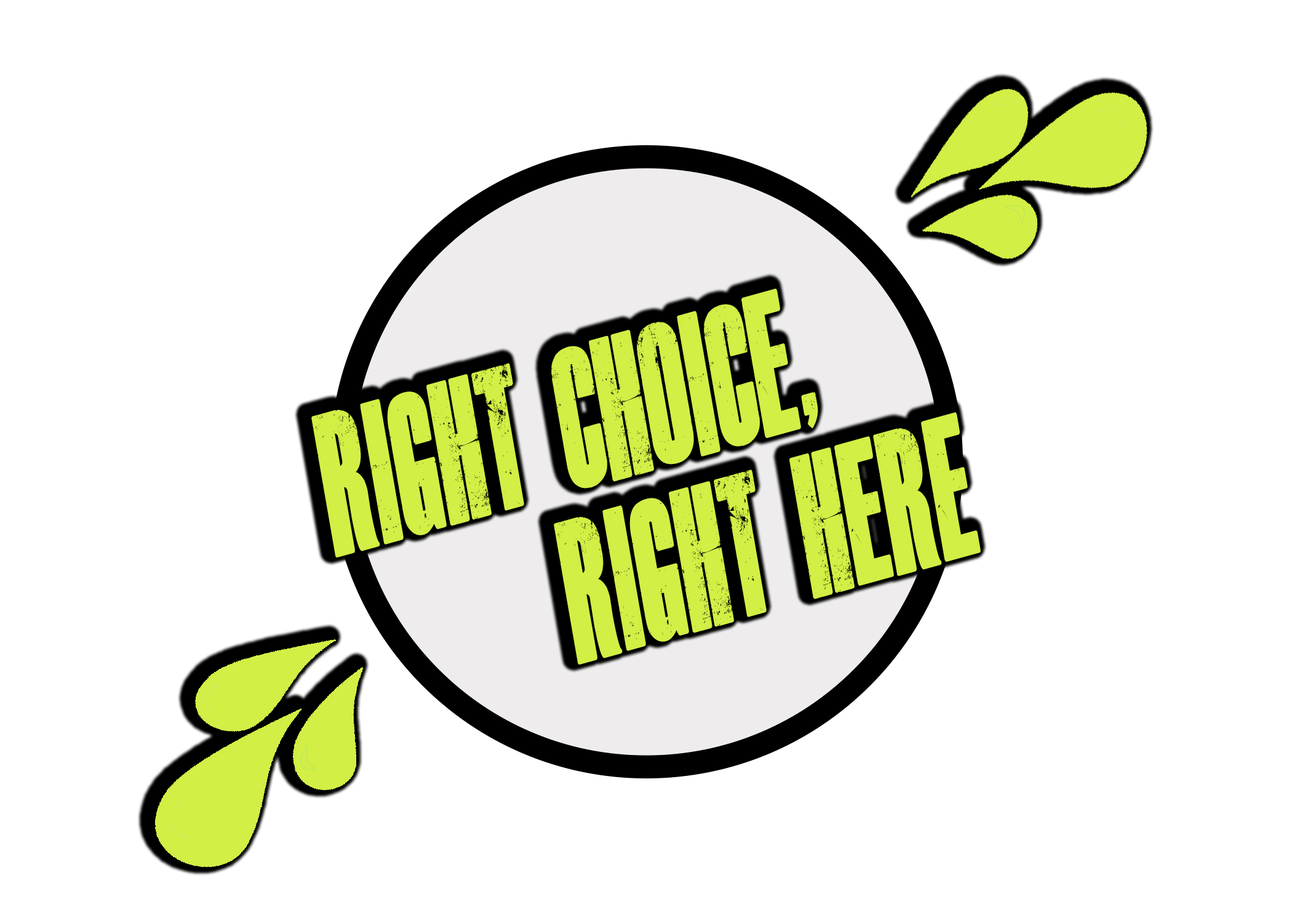
<style>
.page{position:relative;width:1292px;height:923px;background:#ffffff}
.page>*{position:absolute;margin:0}
.t1{font:33.6px "DeadKansas";color:#d1ef45;scale:0.58 1}
</style>
<div class="page">
<p class="t1" style="left:311px;top:289px;width:670px;height:375px;text-align:center;rotate:-15deg">RIGHT CHOICE, <br>         RIGHT HERE</p>
</div>
